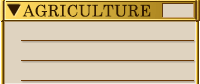
<style>
.page{position:relative;width:200px;height:84px;background:#dfd3c0}
.page>*{position:absolute;margin:0}
.t1{font:16px "CenturySchoolbook";letter-spacing:0.025em;color:#321a02}
</style>
<div class="page">
<p class="t1" style="left:22px;top:4px;width:129px;height:13px">AGRICULTURE</p>
</div>
